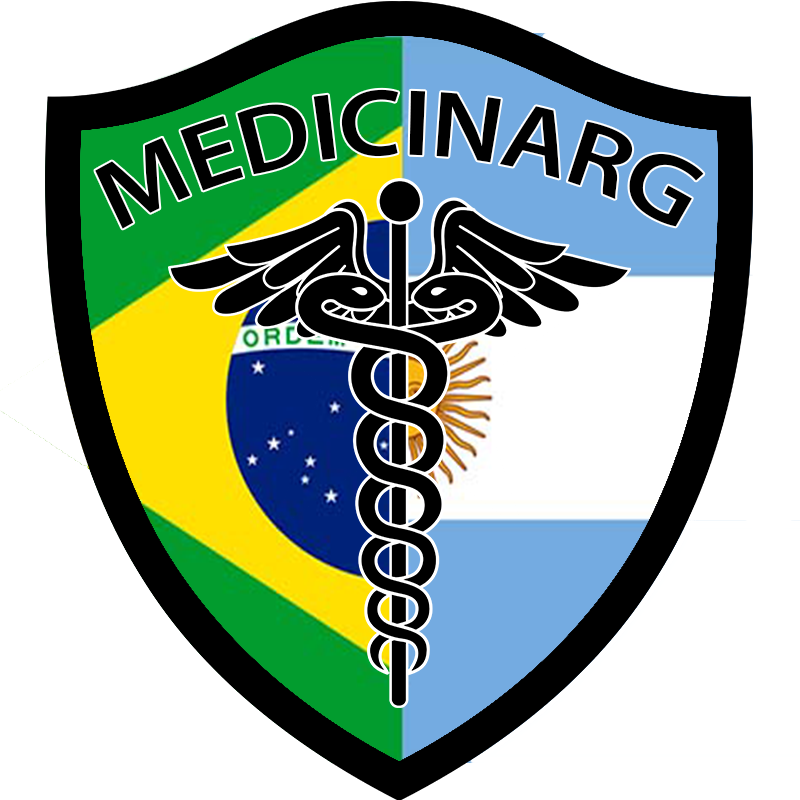
<style>
.page{position:relative;width:800px;height:800px;background:#ffffff}
.page>*{position:absolute;margin:0}
.t1{font:94.5px "MyriadPro-Semibold";color:#000000}
</style>
<div class="page">
<p class="t1" style="left:95px;top:89px;width:609px;height:140px">MEDICINARG</p>
</div>
